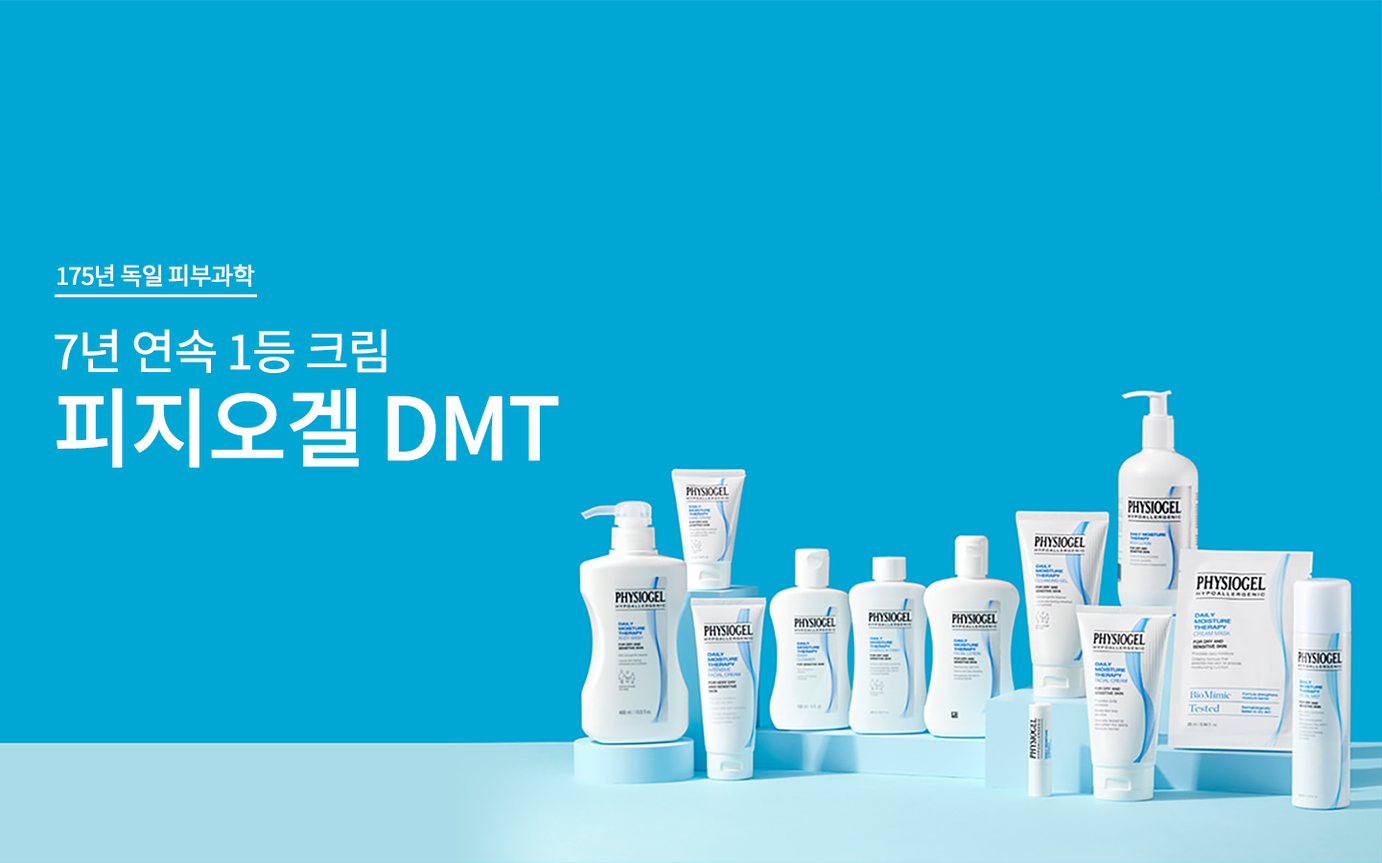
<style>
.page{position:relative;width:1382px;height:863px;background:#00a7d4}
.page>*{position:absolute;margin:0}
.t1{font:24px "NotoSansKR-Regular";letter-spacing:-0.05em;color:#fefefe;font-weight:bold}
.t2{font:47.9px/91.1px "NotoSansKR-Regular";letter-spacing:-0.05em;color:#fefefe;font-weight:bold}
.t3{font:86.3px/91.1px "NotoSansKR-Medium";letter-spacing:-0.05em;color:#fefefe;font-weight:bold}
</style>
<div class="page">
<p class="t1" style="left:58px;top:264px;width:197px;height:24px">175년 독일 피부과학</p>
<p class="t2" style="left:55px;top:329px;width:504px;height:139px">7년 연속 1등 크림 <br><span class="t3">피지오겔 DMT</span></p>
</div>
